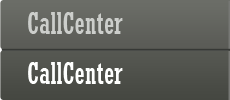
<style>
.page{position:relative;width:230px;height:100px}
.page>*{position:absolute;margin:0}
.t1{font:30px "Rockwell-Condensed";color:#cccecb}
.t2{font:30px "Rockwell-Condensed";color:#fefffe}
</style>
<div class="page">
<p class="t1" style="left:28px;top:12px;width:95px;height:22px">CallCenter</p>
<p class="t2" style="left:28px;top:62px;width:95px;height:22px">CallCenter</p>
</div>
